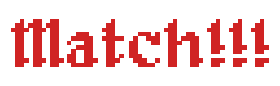
<style>
.page{position:relative;width:280px;height:86px;background:#ffffff}
.page>*{position:absolute;margin:0}
.t1{font:70px "Alagard";color:#d02323}
</style>
<div class="page">
<p class="t1" style="left:11px;top:19px;width:258px;height:48px">Match!!!</p>
</div>
